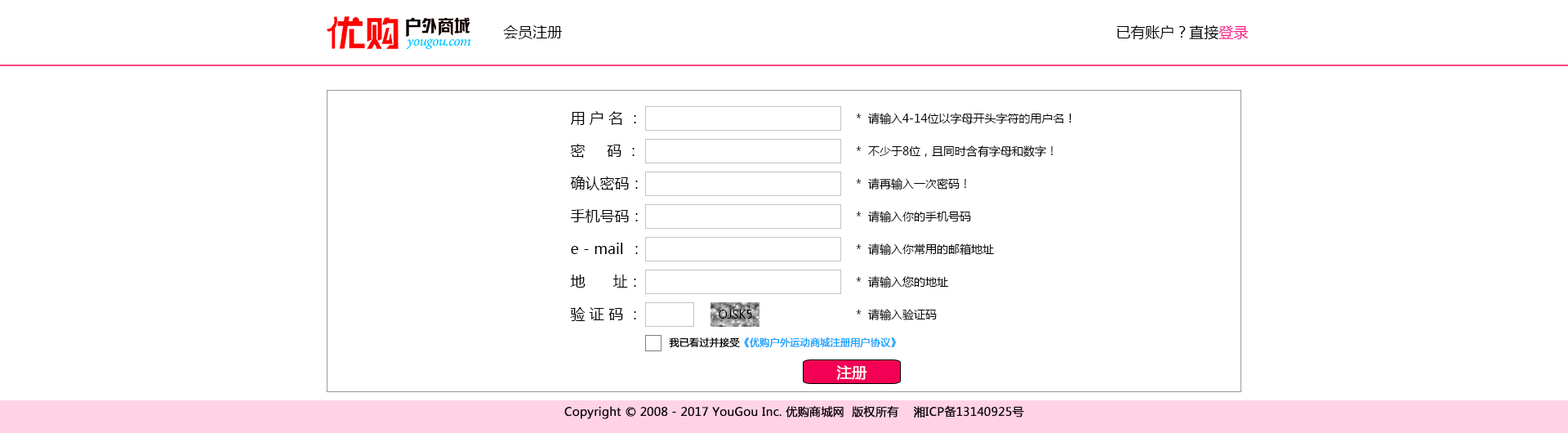
<style>
.page{position:relative;width:1568px;height:433px;background:#ffffff}
.page>*{position:absolute;margin:0}
.t1{font:14.7px "MicrosoftYaHei";color:#000000}
.t2{font:14.7px "MicrosoftYaHei";color:#f61a87}
.t3{font:11.4px "MicrosoftYaHei";color:#000000}
.t4{font:9.8px "MicrosoftYaHei";color:#18a5fe;font-weight:bold}
.t5{font:9.8px "MicrosoftYaHei";color:#000000;font-weight:bold}
.t6{font:14.7px "MicrosoftYaHei";color:#fcfcfc;font-weight:bold}
.t7{font:11.4px "MicrosoftYaHei";color:#0e050a;font-weight:bold}
</style>
<div class="page">
<p class="t1" style="left:503px;top:25px;width:59px;height:14px">会员注册</p>
<p class="t1" style="left:1116px;top:24px;width:133px;height:16px">已有账户？直接<span class="t2">登录</span></p>
<p class="t1" style="left:570px;top:111px;width:66px;height:14px">用 户 名 ：</p>
<p class="t3" style="left:856px;top:113px;width:215px;height:12px">*  请输入4-14位以字母开头字符的用户名！</p>
<p class="t1" style="left:570px;top:144px;width:65px;height:14px">密     码 ：</p>
<p class="t3" style="left:856px;top:145px;width:197px;height:13px">*  不少于8位，且同时含有字母和数字！</p>
<p class="t1" style="left:570px;top:176px;width:68px;height:14px">确认密码：</p>
<p class="t3" style="left:856px;top:178px;width:110px;height:12px">*  请再输入一次密码！</p>
<p class="t1" style="left:570px;top:209px;width:68px;height:14px">手机号码：</p>
<p class="t3" style="left:856px;top:211px;width:115px;height:12px">*  请输入你的手机号码</p>
<p class="t1" style="left:571px;top:243px;width:67px;height:11px">e - mail  ：</p>
<p class="t3" style="left:856px;top:243px;width:138px;height:13px">*  请输入你常用的邮箱地址</p>
<p class="t1" style="left:570px;top:274px;width:66px;height:13px">地    址：</p>
<p class="t3" style="left:856px;top:276px;width:92px;height:12px">*  请输入您的地址</p>
<p class="t1" style="left:570px;top:307px;width:66px;height:14px">验 证 码 ：</p>
<p class="t3" style="left:719px;top:310px;width:33px;height:8px">OJSK5</p>
<p class="t3" style="left:856px;top:309px;width:81px;height:12px">*  请输入验证码</p>
<p class="t4" style="left:669px;top:337px;width:227px;height:11px"><span class="t5">我已看过并接受</span>《优购户外运动商城注册用户协议》</p>
<p class="t6" style="left:836px;top:365px;width:31px;height:15px">注册</p>
<p class="t7" style="left:564px;top:405px;width:460px;height:14px">Copyright © 2008 - 2017 YouGou Inc. 优购商城网  版权所有    湘ICP备13140925号</p>
</div>
